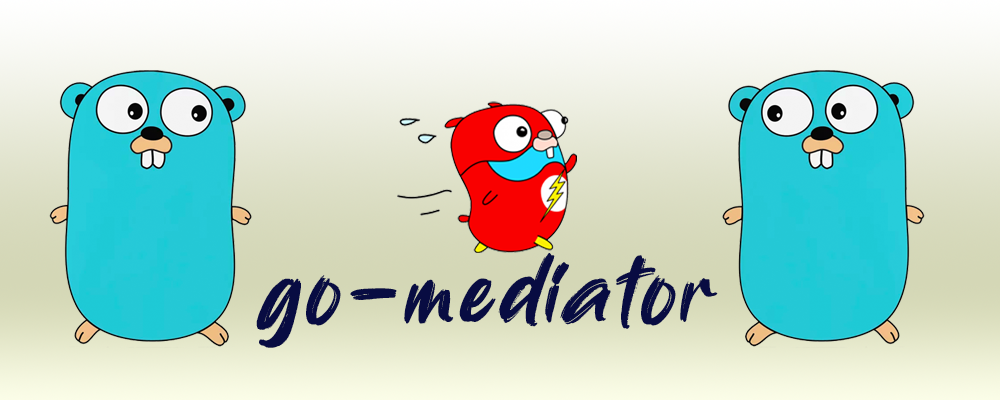
<style>
.page{position:relative;width:1000px;height:400px}
.page>*{position:absolute;margin:0}
.t1{font:96px "Golang";letter-spacing:0.045em;color:#080c42;font-style:italic}
</style>
<div class="page">
<p class="t1" style="left:256px;top:253px;width:462px;height:95px">go-mediator</p>
</div>
